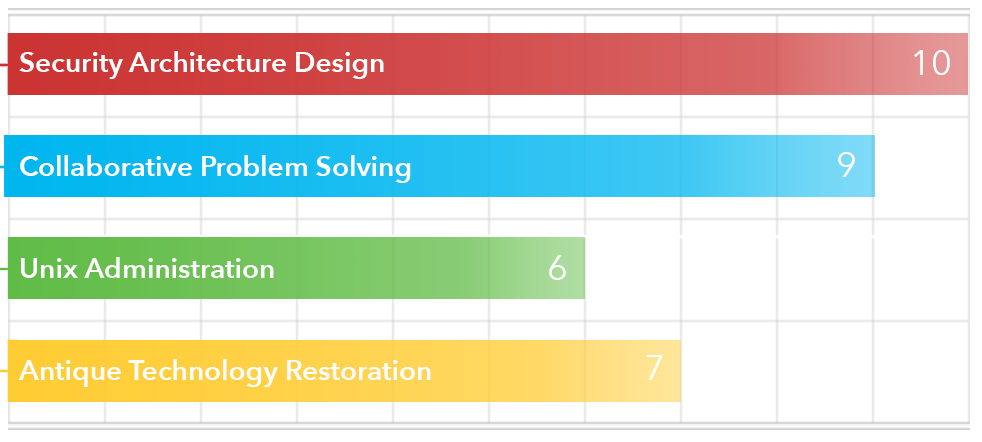
<style>
.page{position:relative;width:982px;height:442px;background:#ffffff}
.page>*{position:absolute;margin:0}
.t1{font:28px "AvenirNext-DemiBold";color:#ffffff}
.t2{font:36px "AvenirNext-Regular";color:#ffffff}
</style>
<div class="page">
<p class="t1" style="left:19px;top:51px;width:365px;height:28px">Security Architecture Design</p>
<p class="t2" style="left:914px;top:50px;width:36px;height:25px">10</p>
<p class="t1" style="left:20px;top:155px;width:391px;height:28px">Collaborative Problem Solving</p>
<p class="t2" style="left:838px;top:152px;width:17px;height:25px">9</p>
<p class="t1" style="left:21px;top:257px;width:253px;height:21px">Unix Administration</p>
<p class="t2" style="left:549px;top:255px;width:17px;height:25px">6</p>
<p class="t1" style="left:18px;top:359px;width:413px;height:28px">Antique Technology Restoration</p>
<p class="t2" style="left:646px;top:355px;width:16px;height:25px">7</p>
</div>
